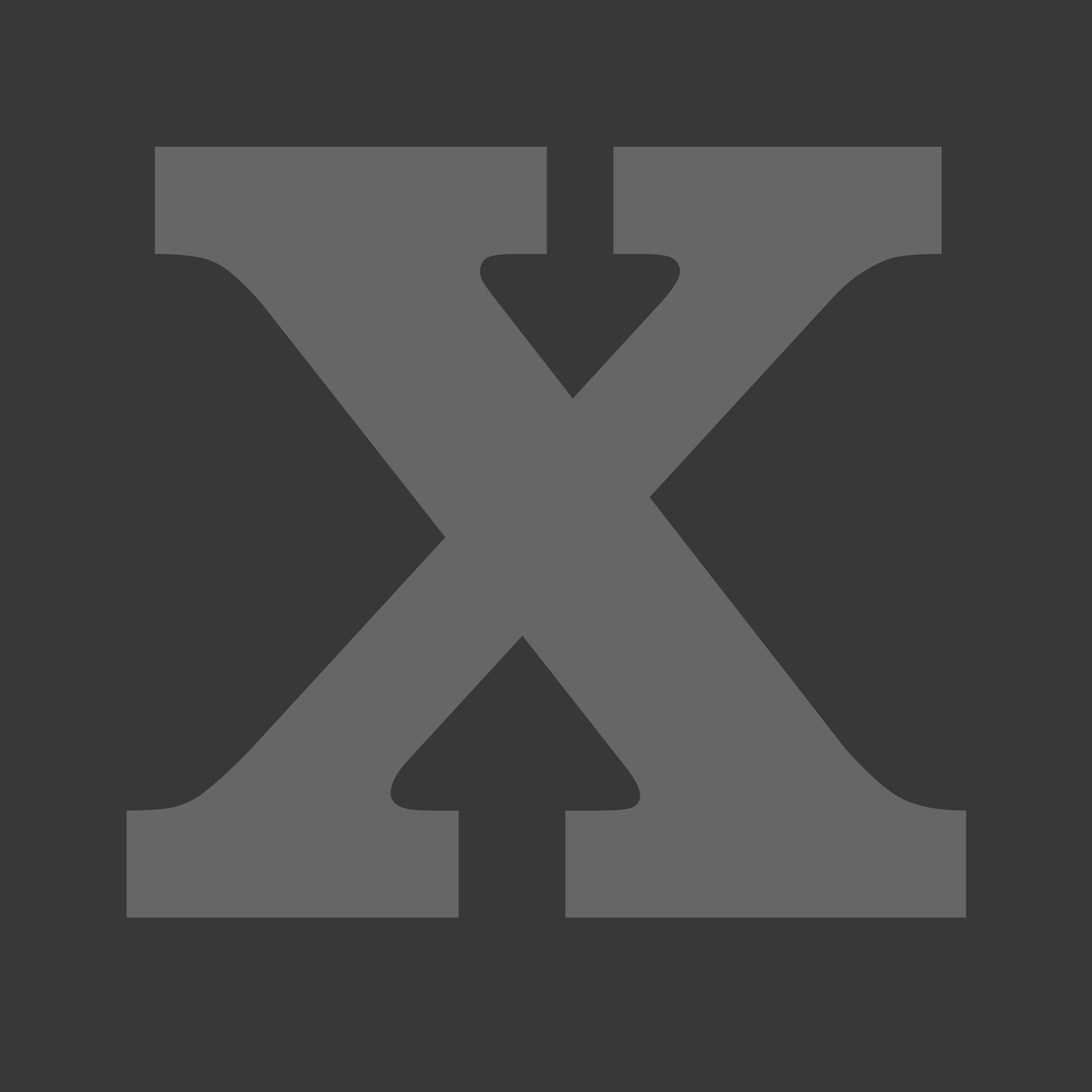
<style>
.page{position:relative;width:1092px;height:1092px;background:#383838}
.page>*{position:absolute;margin:0}
.t1{font:1131.7px "BookmanOldStyle-Bold";color:#666666;scale:0.95 1}
</style>
<div class="page">
<p class="t1" style="left:126px;top:147px;width:840px;height:771px">X</p>
</div>
